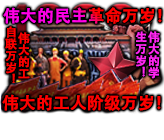
<style>
.page{position:relative;width:164px;height:140px;background:#ffffff}
.page>*{position:absolute;margin:0}
.t1{font:16.5px "AdobeHeitiStd-Regular";font-weight:bold}
.t2{font:11.8px/12.9px "AdobeHeitiStd-Regular";color:#ff0000;font-weight:bold}
.t3{font:11.8px/12.9px "AdobeHeitiStd-Regular";color:#ff27f2;font-weight:bold}
.t4{font:16.5px "AdobeHeitiStd-Regular";color:#ff0000;font-weight:bold}
</style>
<div class="page">
<p class="t1" style="left:3px;top:7px;width:159px;height:17px">伟大的民主革命万岁！</p>
<p class="t2" style="left:5px;top:26px;width:25px;height:58px;text-align:center">伟大的工<br>自联万岁！</p>
<p class="t3" style="left:135px;top:31px;width:25px;height:48px;text-align:center">伟大的学<br>生万岁！</p>
<p class="t4" style="left:2px;top:94px;width:159px;height:17px">伟大的工人阶级万岁！</p>
</div>
